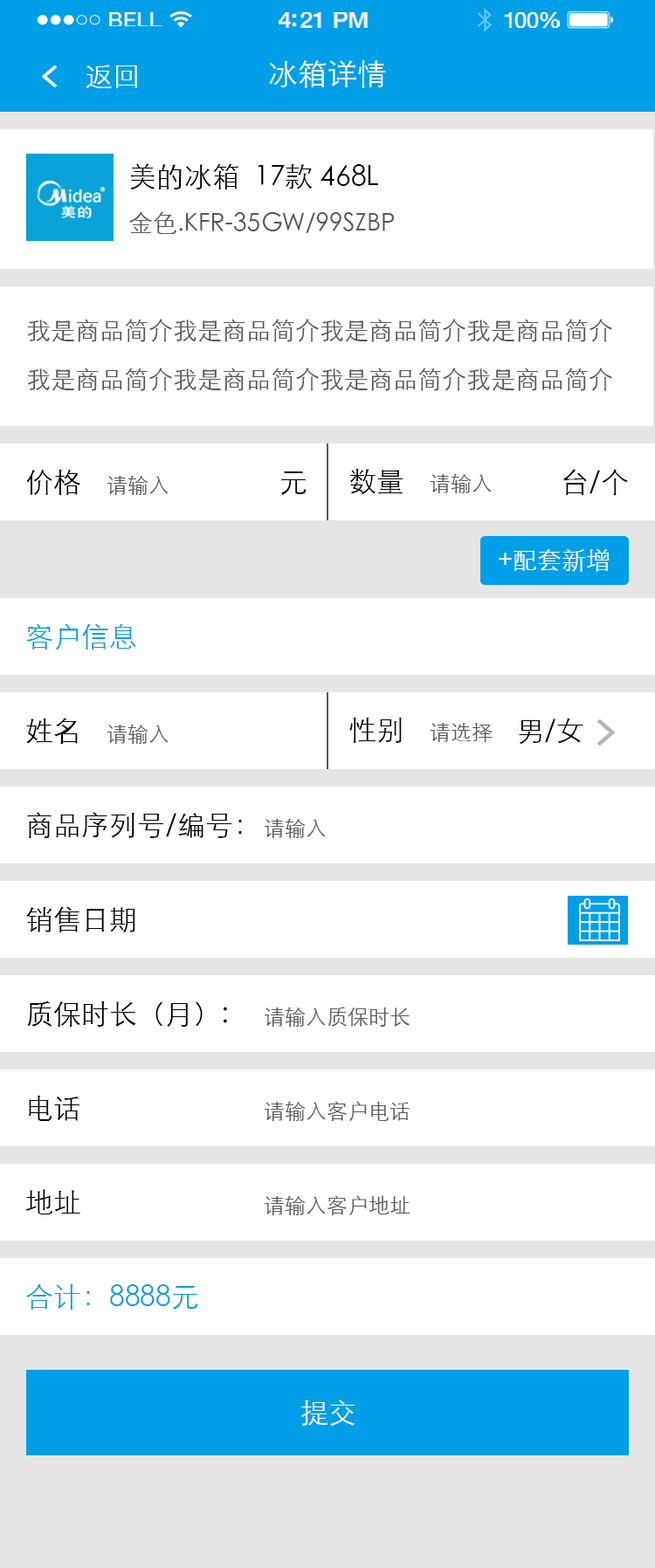
<style>
.page{position:relative;width:655px;height:1568px;background:#ffffff}
.page>*{position:absolute;margin:0}
.t1{font:20.3px "HelveticaNeue";letter-spacing:0.02em;color:#ffffff;scale:1.06 1}
.t2{font:22.1px "HelveticaNeue-Medium";letter-spacing:-0.02em;color:#ffffff;scale:1.06 1}
.t3{font:21.2px "HelveticaNeue";letter-spacing:-0.02em;color:#ffffff;scale:1.06 1}
.t4{font:27.9px "STXihei";color:#ffffff}
.t5{font:29.7px "STXihei";color:#ffffff}
.t6{font:24.4px/48.9px "STXihei";color:#595757}
.t7{font:27.9px/48.9px "STXihei";color:#000000}
.t8{font:27.9px "STXihei";color:#000000}
.t9{font:21px "STXihei";color:#595757}
.t10{font:24.4px "STXihei";color:#ffffff}
.t11{font:27.9px "STXihei";color:#009fe8}
</style>
<div class="page">
<p class="t1" style="left:109px;top:12px;width:53px;height:14px">BELL</p>
<p class="t2" style="left:279px;top:12px;width:89px;height:16px">4:21 PM</p>
<p class="t3" style="left:504px;top:12px;width:56px;height:16px">100%</p>
<p class="t4" style="left:86px;top:65px;width:51px;height:23px">返回</p>
<p class="t5" style="left:269px;top:60px;width:117px;height:28px">冰箱详情</p>
<p class="t6" style="left:129px;top:163px;width:266px;height:71px"><span class="t7">美的冰箱  17款 468L    <br></span>金色.KFR-35GW/99SZBP</p>
<p class="t6" style="left:27px;top:319px;width:585px;height:72px">我是商品简介我是商品简介我是商品简介我是商品简介我是商品简介我是商品简介我是商品简介我是商品简介</p>
<p class="t8" style="left:26px;top:469px;width:54px;height:26px">价格</p>
<p class="t8" style="left:280px;top:471px;width:26px;height:24px">元</p>
<p class="t8" style="left:349px;top:469px;width:54px;height:25px">数量</p>
<p class="t9" style="left:430px;top:473px;width:62px;height:20px">请输入</p>
<p class="t8" style="left:563px;top:469px;width:65px;height:27px">台/个</p>
<p class="t9" style="left:107px;top:475px;width:61px;height:20px">请输入</p>
<p class="t10" style="left:499px;top:549px;width:110px;height:23px">+配套新增</p>
<p class="t11" style="left:26px;top:623px;width:110px;height:27px">客户信息</p>
<p class="t8" style="left:26px;top:718px;width:52px;height:26px">姓名</p>
<p class="t9" style="left:107px;top:724px;width:61px;height:20px">请输入</p>
<p class="t8" style="left:349px;top:717px;width:53px;height:26px">性别</p>
<p class="t9" style="left:430px;top:722px;width:62px;height:20px">请选择</p>
<p class="t8" style="left:519px;top:718px;width:64px;height:27px">男/女</p>
<p class="t8" style="left:27px;top:812px;width:215px;height:26px">商品序列号/编号：</p>
<p class="t9" style="left:264px;top:818px;width:62px;height:20px">请输入</p>
<p class="t8" style="left:26px;top:906px;width:109px;height:26px">销售日期</p>
<p class="t8" style="left:27px;top:1001px;width:200px;height:26px">质保时长（月）:</p>
<p class="t9" style="left:264px;top:1007px;width:145px;height:20px">请输入质保时长</p>
<p class="t8" style="left:29px;top:1095px;width:51px;height:26px">电话</p>
<p class="t9" style="left:264px;top:1101px;width:145px;height:20px">请输入客户电话</p>
<p class="t8" style="left:25px;top:1189px;width:55px;height:25px">地址</p>
<p class="t9" style="left:264px;top:1195px;width:146px;height:20px">请输入客户地址</p>
<p class="t11" style="left:26px;top:1283px;width:172px;height:27px">合计：8888元</p>
<p class="t4" style="left:301px;top:1400px;width:53px;height:26px">提交</p>
</div>
